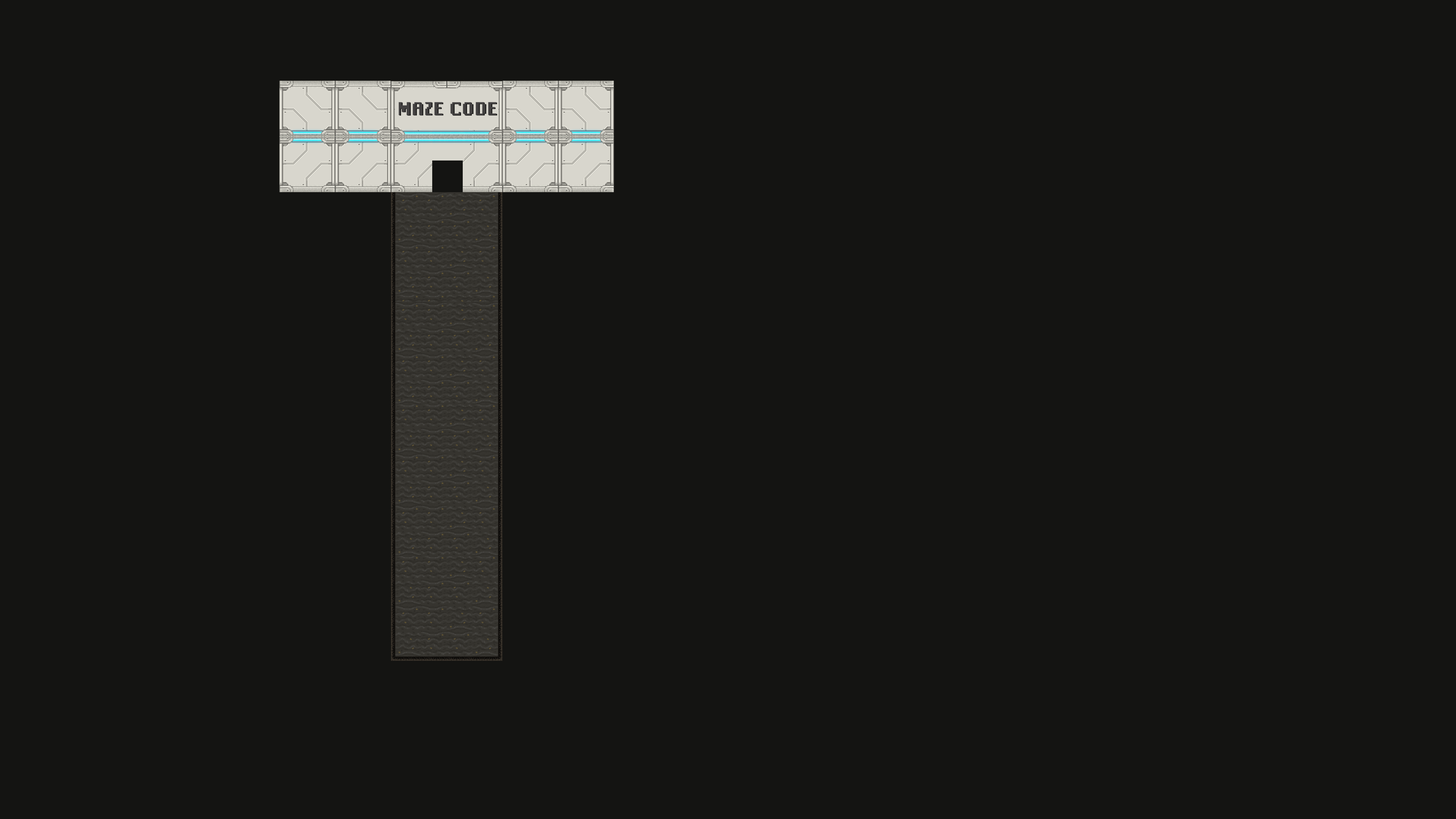
<style>
.page{position:relative;width:1456px;height:819px;background:#141412}
.page>*{position:absolute;margin:0}
.t1{font:19.3px "DigimonBasic";color:#434141}
</style>
<div class="page">
<p class="t1" style="left:398px;top:102px;width:98px;height:13px">Maze Code</p>
<p class="t1" style="left:399px;top:102px;width:98px;height:14px">Maze Code</p>
</div>
